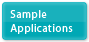
<style>
.page{position:relative;width:89px;height:42px;background:#19b1bc}
.page>*{position:absolute;margin:0}
.t1{font:11px/14px "MyriadPro-Regular";letter-spacing:0.04em;color:#fefefe}
</style>
<div class="page">
<p class="t1" style="left:10px;top:10px;width:63px;height:24px">Sample<br>Applications</p>
</div>
